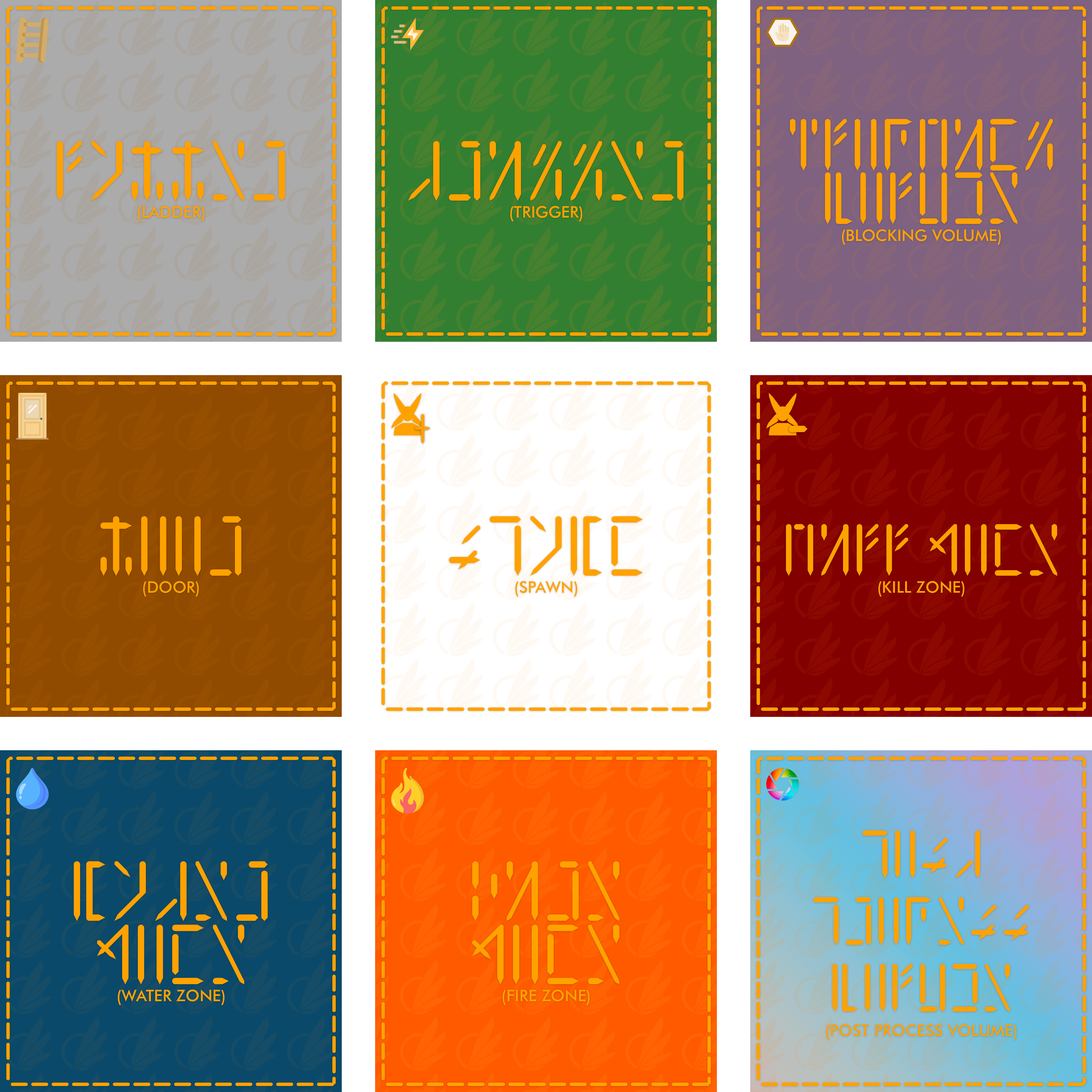
<style>
.page{position:relative;width:1092px;height:1092px}
.page>*{position:absolute;margin:0}
.t1{font:43.4px/53.4px "Avali-Scratch";color:#ffa200}
.t2{font:50.1px "Avali-Scratch";color:#ffa200}
.t3{font:16px "FuturaBT-Medium";color:#ffa200}
.t4{font:25px "Avali-Scratch";color:#ffa200}
.t5{font:43.4px "Avali-Scratch";color:#ffa200}
.t6{font:40px/66.7px "Avali-Scratch";color:#ffa200}
.t7{font:50.1px/63.4px "Avali-Scratch";color:#ffa200}
</style>
<div class="page">
<p class="t1" style="left:790px;top:119px;width:263px;height:105px;text-align:center">blocking<br>volume</p>
<p class="t2" style="left:57px;top:141px;width:228px;height:60px">Ladder</p>
<p class="t2" style="left:408px;top:141px;width:275px;height:60px">trigger</p>
<p class="t3" style="left:138px;top:206px;width:67px;height:16px">(LADDER)</p>
<p class="t3" style="left:510px;top:206px;width:72px;height:16px">(TRIGGER)</p>
<p class="t3" style="left:842px;top:229px;width:159px;height:16px">(BLOCKING VOLUME)</p>
<p class="t4" style="left:415px;top:414px;width:16px;height:30px">+</p>
<p class="t2" style="left:788px;top:426px;width:20px;height:6px">-</p>
<p class="t2" style="left:100px;top:516px;width:141px;height:60px">door</p>
<p class="t2" style="left:449px;top:516px;width:194px;height:60px">Spawn</p>
<p class="t5" style="left:786px;top:524px;width:271px;height:52px">Kill Zone</p>
<p class="t3" style="left:143px;top:581px;width:56px;height:16px">(DOOR)</p>
<p class="t3" style="left:515px;top:581px;width:62px;height:16px">(SPAWN)</p>
<p class="t3" style="left:878px;top:581px;width:86px;height:16px">(KILL ZONE)</p>
<p class="t6" style="left:814px;top:830px;width:215px;height:182px;text-align:center">post<br>process<br>volume</p>
<p class="t7" style="left:74px;top:861px;width:194px;height:123px;text-align:center">water<br>zone</p>
<p class="t7" style="left:472px;top:861px;width:147px;height:123px;text-align:center">fire<br>zone</p>
<p class="t3" style="left:118px;top:990px;width:107px;height:15px">(WATER ZONE)</p>
<p class="t3" style="left:503px;top:990px;width:87px;height:15px">(FIRE ZONE)</p>
<p class="t3" style="left:826px;top:1024px;width:191px;height:16px">(POST PROCESS VOLUME)</p>
</div>
